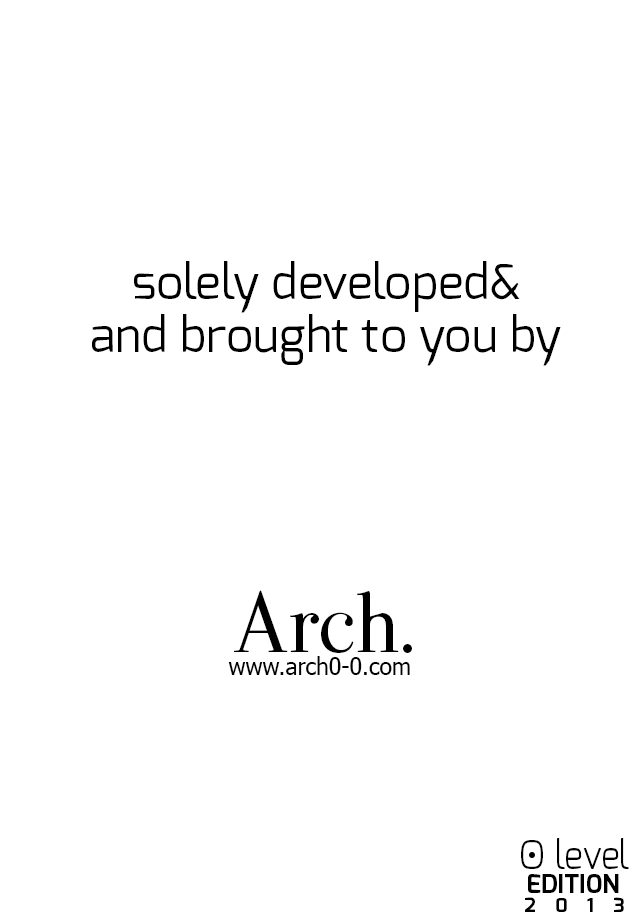
<style>
.page{position:relative;width:640px;height:920px;background:#ffffff}
.page>*{position:absolute;margin:0}
.t1{font:48px "Exo-Regular";color:#000000}
.t2{font:76px "Valentina-Regular";color:#000000}
.t3{font:24px "Tahoma";color:#000000;scale:0.95 1}
.t4{font:39.4px "Exo-Light";color:#000000;scale:0.9 1}
.t5{font:39.4px "Exo-Light";color:#000000}
.t6{font:25.4px "Exo-Bold";color:#000000}
.t7{font:19.3px "Exo-Bold";color:#000000}
</style>
<div class="page">
<p class="t1" style="left:134px;top:261px;width:386px;height:52px">solely developed&amp;</p>
<p class="t1" style="left:92px;top:314px;width:469px;height:52px">and brought to you by</p>
<p class="t2" style="left:234px;top:590px;width:178px;height:63px">Arch.</p>
<p class="t3" style="left:228px;top:656px;width:182px;height:19px">www.arch0-0.com</p>
<p class="t4" style="left:521px;top:838px;width:108px;height:31px"><span class="t5">O </span>level</p>
<p class="t6" style="left:528px;top:874px;width:91px;height:19px">EDITION</p>
<p class="t7" style="left:525px;top:897px;width:99px;height:15px">2    0    1    3</p>
</div>
